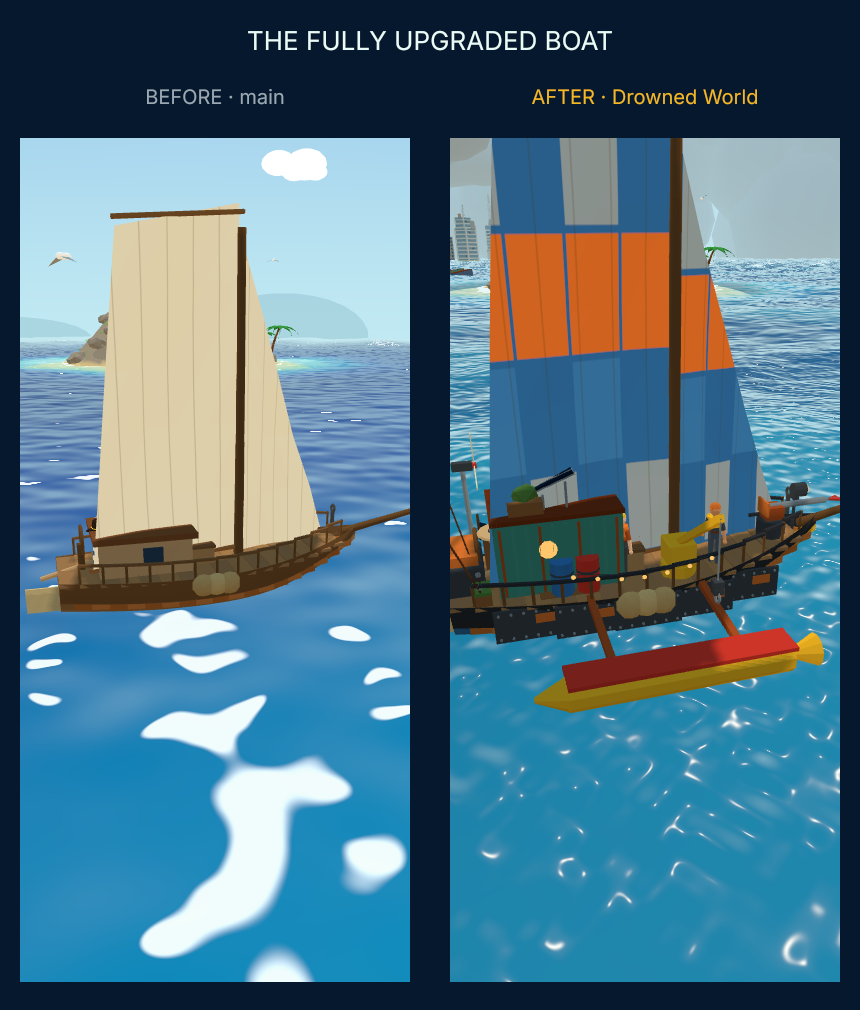
<style>
.page{position:relative;width:860px;height:1010px;background:#06182e}
.page>*{position:absolute;margin:0}
.t1{font:26px "Nunito-Regular";color:#e9fbf6}
.t2{font:20px "Nunito-Regular";color:#9aa9b4}
.t3{font:20px "Nunito-Regular";color:#f2b825}
</style>
<div class="page">
<p class="t1" style="left:247px;top:30px;width:366px;height:22px">THE FULLY UPGRADED BOAT</p>
<p class="t2" style="left:146px;top:88px;width:139px;height:18px">BEFORE · main</p>
<p class="t3" style="left:531px;top:89px;width:227px;height:17px">AFTER · Drowned World</p>
</div>
